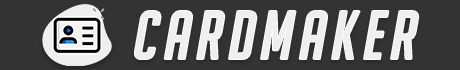
<style>
.page{position:relative;width:460px;height:70px;background:#333333}
.page>*{position:absolute;margin:0}
.t1{font:66.7px "BigNoodleTitling";letter-spacing:0.1em;color:#efefef;font-style:italic}
</style>
<div class="page">
<p class="t1" style="left:135px;top:11px;width:284px;height:48px">CardMaker</p>
</div>
